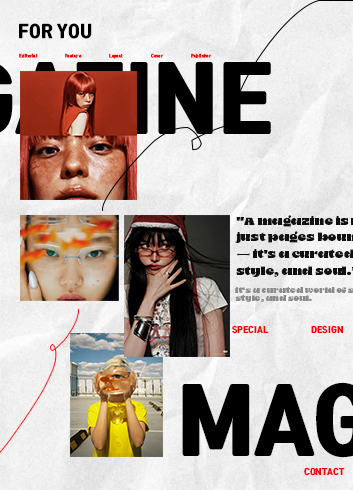
<style>
.page{position:relative;width:353px;height:490px}
.page>*{position:absolute;margin:0}
.t1{font:16.7px "RixSejongroGulimPBlack";color:#000000}
.t2{font:4.2px "RixSejongroGulimPBlack";color:#ff0000}
.t3{font:12.5px/16.7px "8-Heavy";color:#111111}
.t4{font:8.3px/8.3px "8-Heavy";color:#8b8a8a}
.t5{font:8.3px "RixSejongroGulimPBlack";color:#ff0000}
</style>
<div class="page">
<p class="t1" style="left:19px;top:23px;width:73px;height:16px">FOR YOU</p>
<p class="t2" style="left:19px;top:53px;width:19px;height:5px">Editorial</p>
<p class="t2" style="left:65px;top:53px;width:17px;height:5px">Feature</p>
<p class="t2" style="left:109px;top:53px;width:14px;height:6px">Layout</p>
<p class="t2" style="left:151px;top:53px;width:13px;height:5px">Cover</p>
<p class="t2" style="left:191px;top:53px;width:21px;height:5px">Publisher</p>
<p class="t3" style="left:235px;top:215px;width:118px;height:62px">"A magazine is not<br>just pages bound together<br>— it's a curated world of stories,<br>style, and soul."</p>
<p class="t4" style="left:235px;top:286px;width:118px;height:16px">it's a curated world of stories,<br>style, and soul.</p>
<p class="t5" style="left:232px;top:325px;width:37px;height:9px">SPECIAL</p>
<p class="t5" style="left:311px;top:325px;width:32px;height:9px">DESIGN</p>
<p class="t5" style="left:304px;top:467px;width:41px;height:9px">CONTACT</p>
</div>
